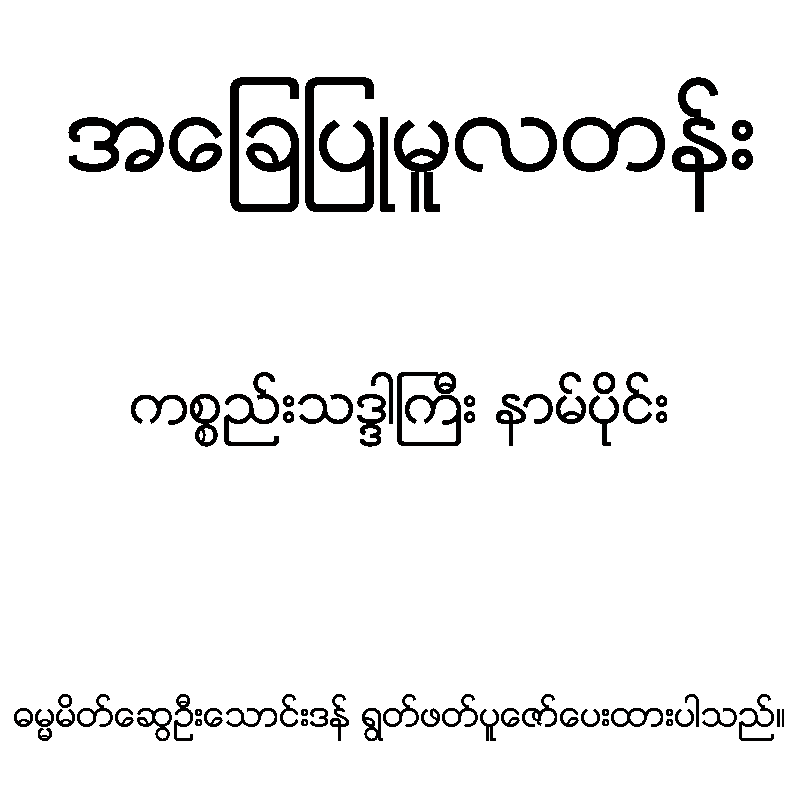
<style>
.page{position:relative;width:800px;height:800px;background:#ffffff}
.page>*{position:absolute;margin:0}
.t1{font:100px "Zawgyi-One";color:#010000}
.t2{font:55px "Zawgyi-One";color:#010000}
.t3{font:35px "Zawgyi-One";color:#010000}
</style>
<div class="page">
<p class="t1" style="left:68px;top:77px;width:685px;height:135px">အေျချပဳမူလတန္း</p>
<p class="t2" style="left:131px;top:372px;width:536px;height:75px">ကစၥည္းသဒၵါႀကီး နာမ္ပိုင္း</p>
<p class="t3" style="left:14px;top:694px;width:770px;height:47px">ဓမၼမိတ္ေဆြဦးေသာင္းဒန္ ရြတ္ဖတ္ပူေဇာ္ေပးထားပါသည္။</p>
</div>
